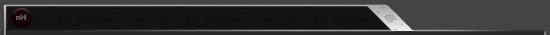
<style>
.page{position:relative;width:550px;height:35px;background:#444444}
.page>*{position:absolute;margin:0}
.t1{font:7px "BorisBlackBloxx";color:#616161}
</style>
<div class="page">
<p class="t1" style="left:16px;top:14px;width:11px;height:6px">nH</p>
</div>
